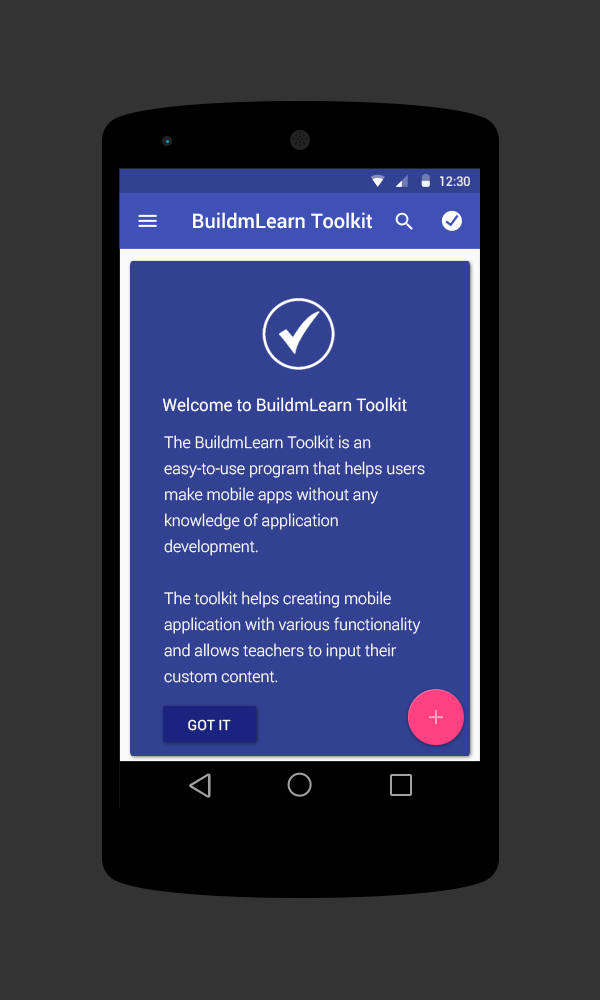
<style>
.page{position:relative;width:600px;height:1000px;background:#333333}
.page>*{position:absolute;margin:0}
.t1{font:12.7px "Roboto-Regular";color:#ffffff}
.t2{font:20px "Roboto-Medium";color:#ffffff}
.t3{font:17.2px "Roboto-Regular";color:#ffffff}
.t4{font:16px/26px "Roboto-Light";color:#ffffff}
.t5{font:14px "Roboto-Regular";color:#ffffff}
</style>
<div class="page">
<p class="t1" style="left:440px;top:176px;width:30px;height:10px">12:30</p>
<p class="t2" style="left:193px;top:212px;width:179px;height:17px">BuildmLearn Toolkit</p>
<p class="t3" style="left:162px;top:397px;width:245px;height:15px">Welcome to BuildmLearn Toolkit</p>
<p class="t4" style="left:164px;top:435px;width:261px;height:248px">The BuildmLearn Toolkit is an easy-to-use program that helps users make mobile apps without any knowledge of application development. <br><br>The toolkit helps creating mobile application with various functionality and allows teachers to input their custom content.</p>
<p class="t5" style="left:188px;top:719px;width:43px;height:12px">GOT IT</p>
</div>
